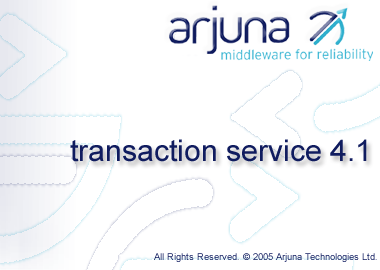
<style>
.page{position:relative;width:380px;height:270px;background:#ffffff}
.page>*{position:absolute;margin:0}
.t1{font:30px "ArialMT";color:#101c5f}
.t2{font:9.5px "ArialMT";color:#142062}
</style>
<div class="page">
<p class="t1" style="left:70px;top:139px;width:297px;height:23px">transaction service 4.1</p>
<p class="t2" style="left:154px;top:253px;width:223px;height:9px">All Rights Reserved. © 2005 Arjuna Technologies Ltd.</p>
</div>
